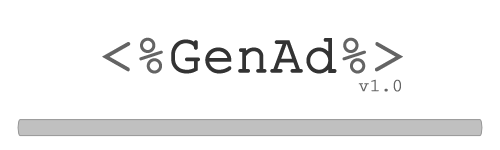
<style>
.page{position:relative;width:500px;height:150px;background:#ffffff}
.page>*{position:absolute;margin:0}
.t1{font:54px "CourierNewPSMT";color:#333333;font-weight:bold}
.t2{font:54px "CourierNewPSMT";color:#646464;font-weight:bold}
.t3{font:18px "CourierNewPSMT";color:#646464;font-weight:bold}
</style>
<div class="page">
<p class="t1" style="left:102px;top:37px;width:301px;height:37px"><span class="t2">&lt;%</span>GenAd<span class="t2">%&gt;</span></p>
<p class="t3" style="left:358px;top:79px;width:43px;height:13px">v1.0</p>
</div>
